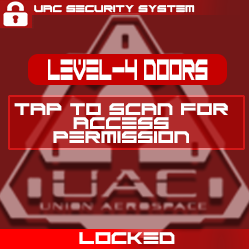
<style>
.page{position:relative;width:249px;height:249px;background:#731818}
.page>*{position:absolute;margin:0}
.t1{font:6.8px "ScifiAdventure";color:#ffffff}
.t2{font:20.5px "ScifiAdventure";color:#ffffff;scale:0.46 1}
.t3{font:11.7px "ScifiAdventure";color:#ffffff}
</style>
<div class="page">
<p class="t1" style="left:34px;top:5px;width:161px;height:8px">UAC SECURITY SYSTEM</p>
<p class="t2" style="left:48px;top:59px;width:160px;height:21px">Level-4 Doors</p>
<p class="t3" style="left:14px;top:103px;width:214px;height:40px;text-align:center">TAP TO SCAN FOR ACCESS <br>PERMISSION</p>
<p class="t3" style="left:79px;top:232px;width:96px;height:12px">LOCKED</p>
</div>
